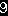
<style>
.page{position:relative;width:8px;height:16px;background:#000000}
.page>*{position:absolute;margin:0}
.t1{font:16px "HelveticaNeue";color:#ffffff}
</style>
<div class="page">
<p class="t1" style="left:0px;top:2px;width:7px;height:11px">9</p>
</div>
